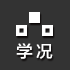
<style>
.page{position:relative;width:70px;height:70px;background:#333333}
.page>*{position:absolute;margin:0}
.t1{font:16.7px "FZLTZHK--GBK1-0";letter-spacing:0.185em;color:#ffffff}
</style>
<div class="page">
<p class="t1" style="left:16px;top:43px;width:37px;height:16px">学况</p>
</div>
